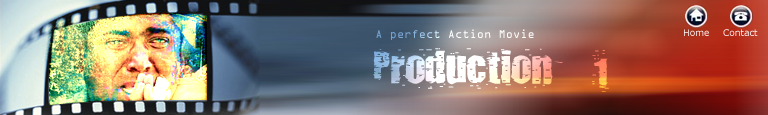
<style>
.page{position:relative;width:768px;height:115px}
.page>*{position:absolute;margin:0}
.t1{font:12px "OCRAExtended"}
.t2{font:9px "Verdana"}
.t3{font:40px "PUNKASSBITCH"}
</style>
<div class="page">
<p class="t1" style="left:376px;top:29px;width:158px;height:11px">A perfect Action Movie</p>
<p class="t2" style="left:684px;top:29px;width:25px;height:7px">Home</p>
<p class="t2" style="left:723px;top:29px;width:35px;height:7px">Contact</p>
<p class="t3" style="left:373px;top:48px;width:236px;height:44px">Production-1</p>
</div>
